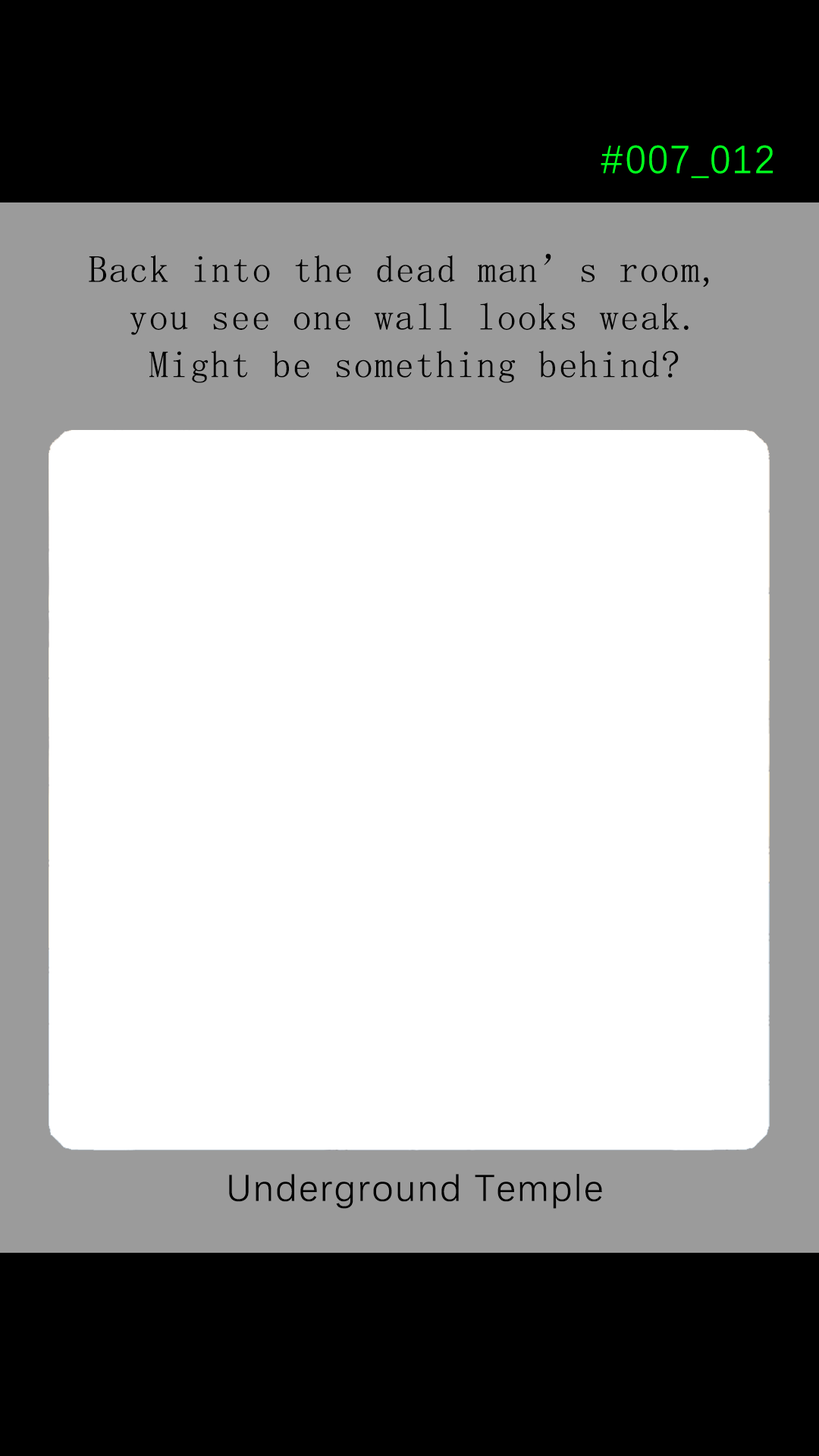
<style>
.page{position:relative;width:819px;height:1456px;background:#ffffff}
.page>*{position:absolute;margin:0}
.t1{font:39.2px "DengXian-Regular";letter-spacing:0.04em;color:#00ff1e}
.t2{font:37.9px/47.6px "SimSun";letter-spacing:0.04em;color:#000000}
.t3{font:37.9px "DengXian-Regular";letter-spacing:0.04em;color:#000000}
</style>
<div class="page">
<p class="t1" style="left:601px;top:145px;width:172px;height:33px">#007_012</p>
<p class="t2" style="left:89px;top:253px;width:620px;height:130px;text-align:center">Back into the dead man’s room, <br>you see one wall looks weak.<br>Might be something behind?</p>
<p class="t3" style="left:229px;top:1174px;width:373px;height:35px">Underground Temple</p>
</div>
